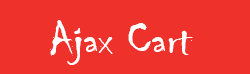
<style>
.page{position:relative;width:250px;height:74px;background:#ee312b}
.page>*{position:absolute;margin:0}
.t1{font:48px "Chiller-Regular";color:#ffffff}
</style>
<div class="page">
<p class="t1" style="left:50px;top:20px;width:143px;height:45px">Ajax Cart</p>
</div>
